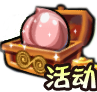
<style>
.page{position:relative;width:97px;height:92px;background:#ffffff}
.page>*{position:absolute;margin:0}
.t1{font:26px "DFPBuDingW12"}
</style>
<div class="page">
<p class="t1" style="left:46px;top:65px;width:50px;height:24px">活动</p>
</div>
